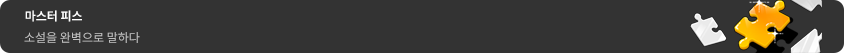
<style>
.page{position:relative;width:844px;height:53px;background:#333333}
.page>*{position:absolute;margin:0}
.t1{font:12px "NotoSansKR-SemiBold";color:#ffffff}
.t2{font:12px "NotoSansKR-Regular";color:#bfbfbf}
</style>
<div class="page">
<p class="t1" style="left:25px;top:10px;width:57px;height:12px">마스터 피스</p>
<p class="t2" style="left:24px;top:32px;width:116px;height:11px">소설을 완벽으로 말하다</p>
</div>
